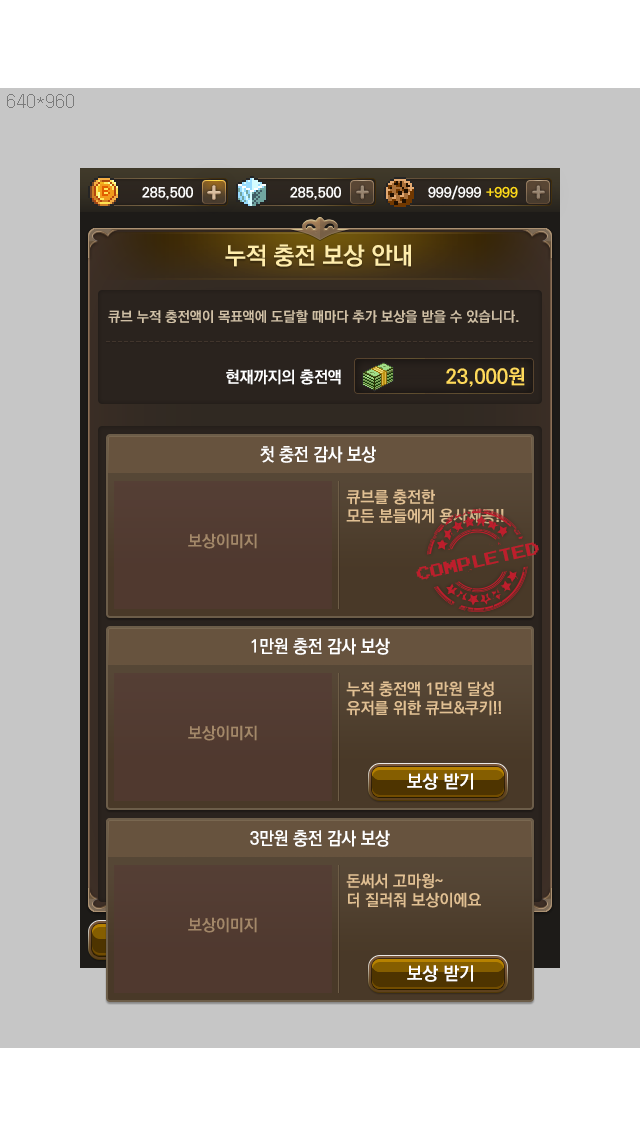
<style>
.page{position:relative;width:640px;height:1136px;background:#c6c6c6}
.page>*{position:absolute;margin:0}
.t1{font:24px "KoPubDotumBold";color:#ffedab}
.t2{font:14px "KoPubDotumBold";color:#d0c0a6}
.t3{font:16px "KoPubDotumBold";color:#ffffff}
.t4{font:20px "KoPubDotumBold";color:#ffda5b}
.t5{font:18px "KoPubDotumBold";color:#ffffff;scale:0.92 1}
.t6{font:16px "KoPubDotumBold";color:#e1c093}
.t7{font:16px "KoPubDotumBold";color:#a38869}
.t8{font:14px "PressStart2P";color:#bd1e2c;text-transform:uppercase}
.t9{font:18px "KoPubDotumBold";color:#ffffff}
</style>
<div class="page">
<p class="t1" style="left:225px;top:244px;width:186px;height:23px">누적 충전 보상 안내</p>
<p class="t2" style="left:108px;top:310px;width:411px;height:13px">큐브 누적 충전액이 목표액에 도달할 때마다 추가 보상을 받을 수 있습니다.</p>
<p class="t3" style="left:226px;top:369px;width:115px;height:16px">현재까지의 충전액</p>
<p class="t4" style="left:446px;top:367px;width:79px;height:20px">23,000원</p>
<p class="t5" style="left:260px;top:446px;width:116px;height:17px">첫 충전 감사 보상</p>
<p class="t6" style="left:346px;top:489px;width:158px;height:35px">큐브를 충전한 <br>모든 분들에게 용사제공!!</p>
<p class="t7" style="left:188px;top:533px;width:69px;height:16px">보상이미지</p>
<p class="t8" style="left:416px;top:542px;width:123px;height:38px;rotate:-13deg">Completed</p>
<p class="t5" style="left:251px;top:638px;width:139px;height:17px">1만원 충전 감사 보상</p>
<p class="t6" style="left:346px;top:681px;width:155px;height:35px">누적 충전액 1만원 달성<br>유저를 위한 큐브&amp;쿠키!!</p>
<p class="t7" style="left:188px;top:725px;width:69px;height:16px">보상이미지</p>
<p class="t9" style="left:407px;top:773px;width:66px;height:17px">보상 받기</p>
<p class="t5" style="left:250px;top:830px;width:140px;height:17px">3만원 충전 감사 보상</p>
<p class="t6" style="left:346px;top:873px;width:135px;height:35px">돈써서 고마웡~<br>더 질러줘 보상이에요</p>
<p class="t7" style="left:188px;top:917px;width:69px;height:16px">보상이미지</p>
<p class="t9" style="left:407px;top:965px;width:66px;height:17px">보상 받기</p>
</div>
